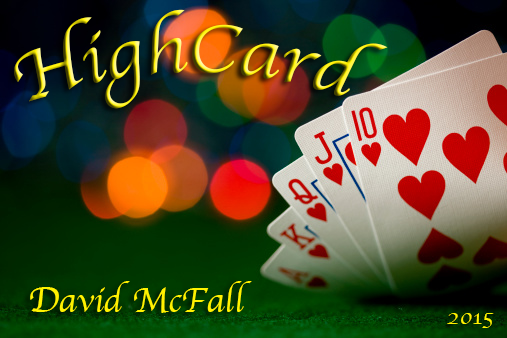
<style>
.page{position:relative;width:507px;height:338px}
.page>*{position:absolute;margin:0}
.t1{font:72px "Apple-Chancery"}
.t2{font:36px "Apple-Chancery";color:#fff200}
.t3{font:24px "Apple-Chancery";color:#fff200}
</style>
<div class="page">
<p class="t1" style="left:13px;top:9px;width:375px;height:100px">HighCard</p>
<p class="t2" style="left:30px;top:281px;width:222px;height:32px">David McFall</p>
<p class="t3" style="left:447px;top:313px;width:47px;height:15px">2015</p>
</div>
